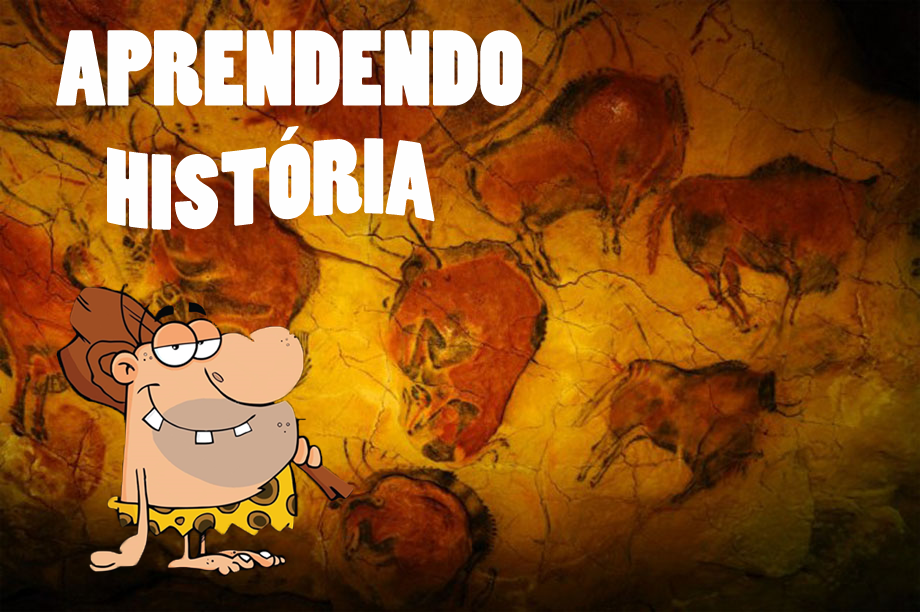
<style>
.page{position:relative;width:920px;height:612px}
.page>*{position:absolute;margin:0}
.t1{font:100px "PoplarStd";color:#fefefe}
</style>
<div class="page">
<p class="t1" style="left:56px;top:30px;width:467px;height:76px">APRENDENDO</p>
<p class="t1" style="left:107px;top:126px;width:328px;height:104px">HISTÓRIA</p>
</div>
